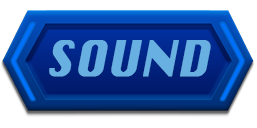
<style>
.page{position:relative;width:257px;height:128px;background:#ffffff}
.page>*{position:absolute;margin:0}
.t1{font:47.4px "Silom";color:#67b0e1;font-weight:bold;font-style:italic}
</style>
<div class="page">
<p class="t1" style="left:49px;top:40px;width:162px;height:37px">SOUND</p>
</div>
